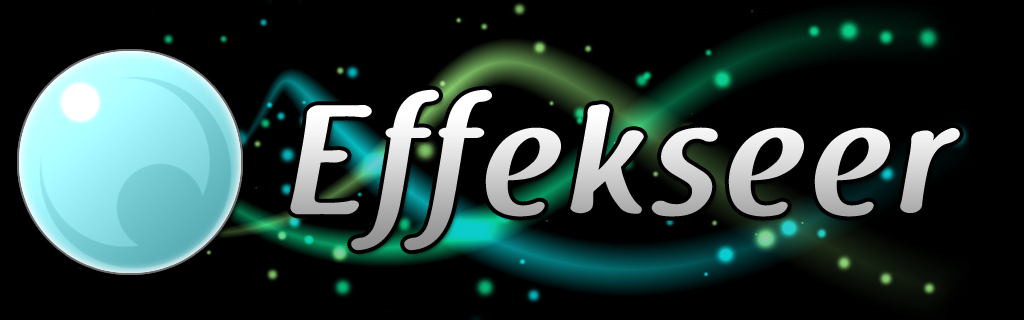
<style>
.page{position:relative;width:1024px;height:320px;background:#000000}
.page>*{position:absolute;margin:0}
.t1{font:154px "RaspoutineDemiBold";letter-spacing:0.075em}
</style>
<div class="page">
<p class="t1" style="left:290px;top:89px;width:670px;height:162px">Effekseer</p>
</div>
